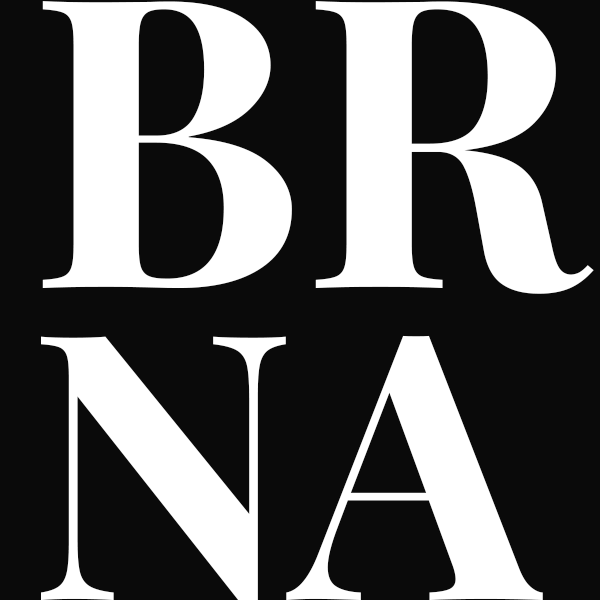
<style>
.page{position:relative;width:600px;height:600px;background:#0a0a0a}
.page>*{position:absolute;margin:0}
.t1{font:405.1px "PlayfairDisplay-Bold";color:#ffffff;text-transform:uppercase}
.t2{font:371.8px "PlayfairDisplay-Bold";color:#ffffff;text-transform:uppercase}
</style>
<div class="page">
<p class="t1" style="left:42px;top:1px;width:552px;height:293px">br</p>
<p class="t2" style="left:41px;top:335px;width:502px;height:266px">na</p>
</div>
